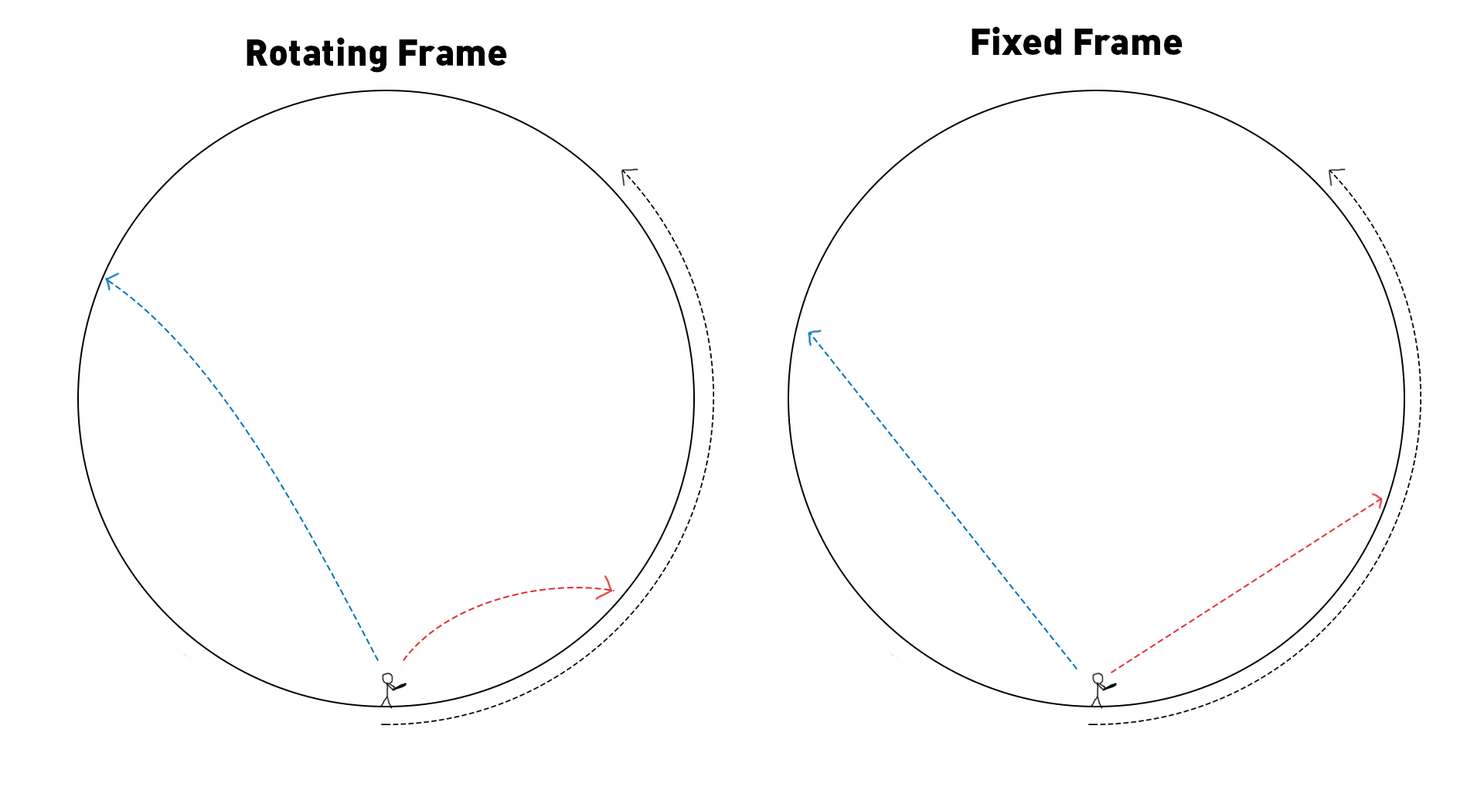
<style>
.page{position:relative;width:1484px;height:804px;background:#ffffff}
.page>*{position:absolute;margin:0}
.t1{font:37.1px "DIN-BlackAlternate";color:#000000}
</style>
<div class="page">
<p class="t1" style="left:971px;top:26px;width:211px;height:29px">Fixed Frame</p>
<p class="t1" style="left:247px;top:37px;width:260px;height:36px">Rotating Frame</p>
</div>
